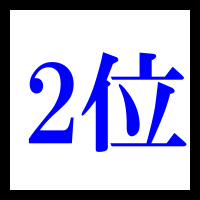
<style>
.page{position:relative;width:200px;height:200px;background:#ffffff}
.page>*{position:absolute;margin:0}
.t1{font:110px "HGSMinchoE";color:#0000ff}
</style>
<div class="page">
<p class="t1" style="left:28px;top:52px;width:159px;height:100px">2位</p>
</div>
